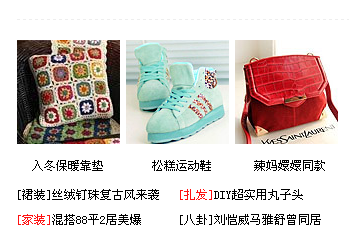
<style>
.page{position:relative;width:364px;height:250px;background:#ffffff}
.page>*{position:absolute;margin:0}
.t1{font:12px "SimSun";color:#000000}
.t2{font:12px/25px "SimSun";color:#000000}
.t3{font:12px/25px "SimSun";color:#ff1111}
</style>
<div class="page">
<p class="t1" style="left:32px;top:160px;width:293px;height:11px">入冬保暖靠垫        松糕运动鞋       辣妈嬛嬛同款</p>
<p class="t2" style="left:18px;top:189px;width:303px;height:36px">[裙装]丝绒钉珠复古风来袭   <span class="t3">[扎发]</span>DIY超实用丸子头<br><span class="t3">[家装]</span>混搭88平2居美爆      [八卦]刘恺威马雅舒曾同居</p>
</div>
